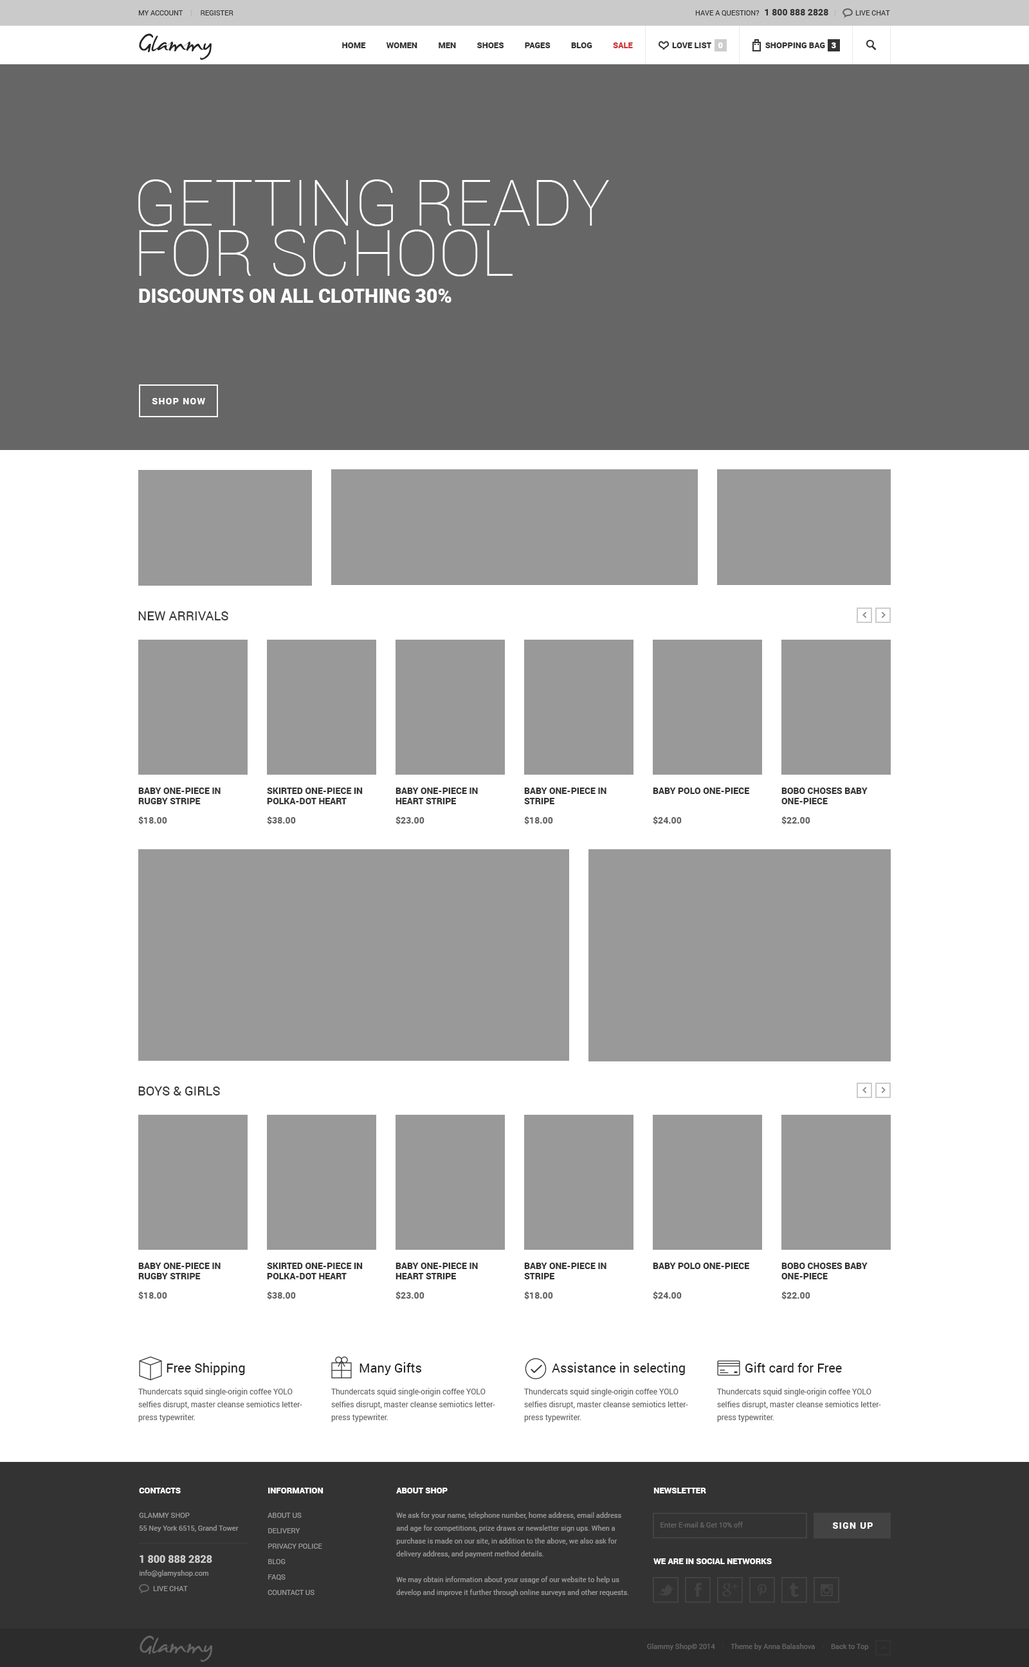
<style>
.page{position:relative;width:1029px;height:1667px;background:#ffffff}
.page>*{position:absolute;margin:0}
.t1{font:7.1px "Roboto-Regular";color:#333333;text-transform:uppercase}
.t2{font:9px "Roboto-Black";color:#333333;text-transform:uppercase}
.t3{font:38.6px "JamesFajardo";color:#242424}
.t4{font:8.4px "Roboto-Black";color:#333333;text-transform:uppercase}
.t5{font:8.4px "Roboto-Black";color:#cc3333;text-transform:uppercase}
.t6{font:8.4px "Roboto-Black";color:#ffffff;text-transform:uppercase}
.t7{font:64.3px "Roboto-Thin";color:#ffffff;text-transform:uppercase}
.t8{font:19.3px "Roboto-Black";color:#ffffff;text-transform:uppercase}
.t9{font:9px "Roboto-Black";letter-spacing:0.1em;color:#ffffff;text-transform:uppercase}
.t10{font:12.9px "Roboto-Regular";color:#333333;text-transform:uppercase}
.t11{font:9px "Roboto-Black";color:#333333}
.t12{font:9px "Roboto-Black";color:#666666}
.t13{font:12.9px "Roboto-Regular";color:#242424}
.t14{font:7.7px/12.9px "Roboto-Regular";color:#666666}
.t15{font:7.1px/12.9px "Roboto-Regular";color:#999999}
.t16{font:7.1px/15.4px "Roboto-Regular";color:#999999;text-transform:uppercase}
.t17{font:10.3px/32.1px "Roboto-Black";color:#cccccc}
.t18{font:7.1px "Roboto-Regular";color:#666666}
.t19{font:7.1px "Roboto-Regular";color:#333333}
</style>
<div class="page">
<p class="t1" style="left:138px;top:10px;width:95px;height:5px">MY ACCOUNT          Register</p>
<p class="t1" style="left:695px;top:9px;width:133px;height:7px">HAVE A QUESTION?   <span class="t2">1 800 888 2828</span></p>
<p class="t1" style="left:855px;top:10px;width:35px;height:5px">Live chat</p>
<p class="t3" style="left:139px;top:33px;width:73px;height:27px">Glammy</p>
<p class="t4" style="left:342px;top:42px;width:291px;height:6px">Home          women          men          shoes          pages          Blog          <span class="t5">sale</span></p>
<p class="t4" style="left:672px;top:42px;width:39px;height:6px">Love list</p>
<p class="t6" style="left:717px;top:42px;width:6px;height:6px">0</p>
<p class="t4" style="left:765px;top:42px;width:60px;height:6px">shopping bag</p>
<p class="t6" style="left:831px;top:42px;width:5px;height:6px">3</p>
<p class="t7" style="left:138px;top:179px;width:471px;height:97px">getting ready for school</p>
<p class="t8" style="left:139px;top:289px;width:312px;height:14px">discounts on all clothing 30%</p>
<p class="t9" style="left:152px;top:398px;width:53px;height:6px">SHOP NOW</p>
<p class="t10" style="left:138px;top:611px;width:90px;height:9px">new arrivals</p>
<p class="t11" style="left:138px;top:788px;width:83px;height:16px">BABY ONE-PIECE IN RUGBY STRIPE</p>
<p class="t2" style="left:267px;top:788px;width:96px;height:16px">skirted one-piece in polka-dot heart</p>
<p class="t2" style="left:395px;top:788px;width:83px;height:16px">Baby one-piece in heart stripe</p>
<p class="t2" style="left:524px;top:788px;width:82px;height:16px">Baby one-piece in stripe</p>
<p class="t2" style="left:652px;top:788px;width:97px;height:6px">Baby polo one-piece</p>
<p class="t11" style="left:781px;top:788px;width:86px;height:16px">BOBO CHOSES BABY ONE-PIECE</p>
<p class="t12" style="left:138px;top:816px;width:29px;height:9px">$18.00</p>
<p class="t12" style="left:267px;top:816px;width:29px;height:9px">$38.00</p>
<p class="t12" style="left:395px;top:816px;width:29px;height:9px">$23.00</p>
<p class="t12" style="left:524px;top:816px;width:29px;height:9px">$18.00</p>
<p class="t12" style="left:652px;top:816px;width:29px;height:9px">$24.00</p>
<p class="t12" style="left:781px;top:816px;width:29px;height:9px">$22.00</p>
<p class="t10" style="left:138px;top:1086px;width:82px;height:9px">Boys &amp; Girls</p>
<p class="t11" style="left:138px;top:1263px;width:83px;height:16px">BABY ONE-PIECE IN RUGBY STRIPE</p>
<p class="t2" style="left:267px;top:1263px;width:96px;height:16px">skirted one-piece in polka-dot heart</p>
<p class="t2" style="left:395px;top:1263px;width:83px;height:16px">Baby one-piece in heart stripe</p>
<p class="t2" style="left:524px;top:1263px;width:82px;height:16px">Baby one-piece in stripe</p>
<p class="t2" style="left:652px;top:1263px;width:97px;height:6px">Baby polo one-piece</p>
<p class="t11" style="left:781px;top:1263px;width:86px;height:16px">BOBO CHOSES BABY ONE-PIECE</p>
<p class="t12" style="left:138px;top:1291px;width:29px;height:9px">$18.00</p>
<p class="t12" style="left:267px;top:1291px;width:29px;height:9px">$38.00</p>
<p class="t12" style="left:395px;top:1291px;width:29px;height:9px">$23.00</p>
<p class="t12" style="left:524px;top:1291px;width:29px;height:9px">$18.00</p>
<p class="t12" style="left:652px;top:1291px;width:29px;height:9px">$24.00</p>
<p class="t12" style="left:781px;top:1291px;width:29px;height:9px">$22.00</p>
<p class="t13" style="left:166px;top:1362px;width:79px;height:13px">Free Shipping</p>
<p class="t13" style="left:359px;top:1362px;width:62px;height:13px">Many Gifts</p>
<p class="t13" style="left:552px;top:1362px;width:133px;height:13px">Assistance in selecting</p>
<p class="t13" style="left:745px;top:1362px;width:97px;height:10px">Gift card for Free</p>
<p class="t14" style="left:138px;top:1388px;width:164px;height:34px">Thundercats squid single-origin coffee YOLO selfies disrupt, master cleanse semiotics letterpress typewriter.</p>
<p class="t14" style="left:331px;top:1388px;width:164px;height:34px">Thundercats squid single-origin coffee YOLO selfies disrupt, master cleanse semiotics letterpress typewriter.</p>
<p class="t14" style="left:524px;top:1388px;width:164px;height:34px">Thundercats squid single-origin coffee YOLO selfies disrupt, master cleanse semiotics letterpress typewriter.</p>
<p class="t14" style="left:717px;top:1388px;width:164px;height:34px">Thundercats squid single-origin coffee YOLO selfies disrupt, master cleanse semiotics letterpress typewriter.</p>
<p class="t6" style="left:139px;top:1488px;width:42px;height:5px">Contacts</p>
<p class="t6" style="left:268px;top:1488px;width:55px;height:5px">Information</p>
<p class="t6" style="left:396px;top:1488px;width:51px;height:5px">About shop</p>
<p class="t6" style="left:653px;top:1488px;width:53px;height:5px">NEWSLETTER</p>
<p class="t15" style="left:139px;top:1513px;width:100px;height:78px"><span class="t16">Glammy Shop<br></span>55 Ney York 6515, Grand Tower<br><span class="t17">1 800 888 2828<br></span>info@glamyshop.com<br><span class="t16">        Live chat</span></p>
<p class="t16" style="left:267px;top:1513px;width:55px;height:82px">About us<br>Delivery<br>Privacy police<br>Blog<br>Faqs<br>countact us</p>
<p class="t15" style="left:396px;top:1512px;width:233px;height:84px">We ask for your name, telephone number, home address, email address and age for competitions, prize draws or newsletter sign ups. When a purchase is made on our site, in addition to the above, we also ask for delivery address, and payment method details. <br><br>We may obtain information about your usage of our website to help us develop and improve it further through online surveys and other requests.</p>
<p class="t18" style="left:660px;top:1522px;width:82px;height:5px">Enter E-mail &amp; Get 10% off</p>
<p class="t9" style="left:833px;top:1522px;width:39px;height:7px">SIGN UP</p>
<p class="t6" style="left:653px;top:1558px;width:118px;height:6px">we are in social networks</p>
<p class="t18" style="left:647px;top:1643px;width:222px;height:7px">Glammy Shop© 2014<span class="t19">    |    </span>Theme by Anna Balashova<span class="t19">    |    </span>Back to Top</p>
</div>
